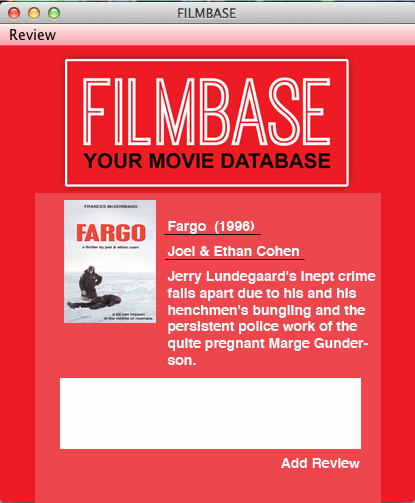
<style>
.page{position:relative;width:415px;height:503px;background:#ed474d}
.page>*{position:absolute;margin:0}
.t1{font:14px "Helvetica-Bold";color:#ffffff}
</style>
<div class="page">
<p class="t1" style="left:168px;top:221px;width:87px;height:13px">Fargo  (1996)</p>
<p class="t1" style="left:167px;top:246px;width:132px;height:10px">Joel &amp; Ethan Cohen</p>
<p class="t1" style="left:167px;top:271px;width:209px;height:94px">Jerry Lundegaard's inept crime falls apart due to his and his henchmen's bungling and the persistent police work of the quite pregnant Marge Gunderson.</p>
<p class="t1" style="left:281px;top:458px;width:79px;height:10px">Add Review</p>
</div>
